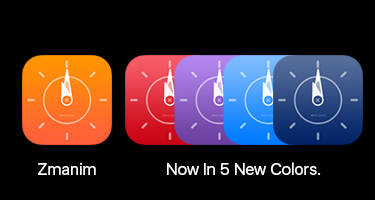
<style>
.page{position:relative;width:375px;height:200px;background:#000000}
.page>*{position:absolute;margin:0}
.t1{font:16.7px "SFUIDisplay-Regular";color:#ffffff}
</style>
<div class="page">
<p class="t1" style="left:38px;top:162px;width:58px;height:13px">Zmanim</p>
<p class="t1" style="left:167px;top:162px;width:154px;height:13px">Now In 5 New Colors.</p>
</div>
